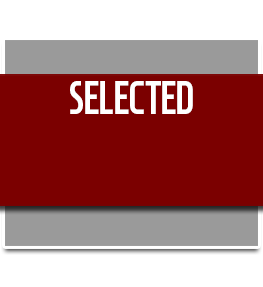
<style>
.page{position:relative;width:263px;height:287px;background:#7b0000}
.page>*{position:absolute;margin:0}
.t1{font:43.7px "HomenajeMod-Bold";color:#ffffff;scale:0.87 1}
</style>
<div class="page">
<p class="t1" style="left:70px;top:81px;width:123px;height:33px">SELECTED</p>
</div>
